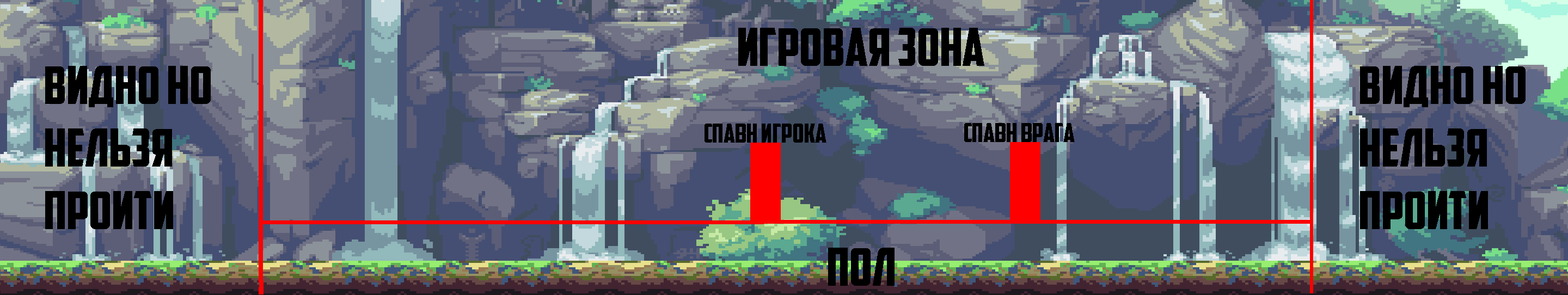
<style>
.page{position:relative;width:1568px;height:295px}
.page>*{position:absolute;margin:0}
.t1{font:52.3px "AmericanCaptainCyrillic";color:#000000}
.t2{font:26.1px "AmericanCaptainCyrillic";color:#000000}
</style>
<div class="page">
<p class="t1" style="left:738px;top:28px;width:246px;height:38px">ИГРОВАЯ ЗОНА</p>
<p class="t1" style="left:45px;top:66px;width:166px;height:163px">ВИДНО НО<br>НЕЛЬЗЯ <br>ПРОЙТИ</p>
<p class="t1" style="left:1360px;top:66px;width:166px;height:163px">ВИДНО НО<br>НЕЛЬЗЯ <br>ПРОЙТИ</p>
<p class="t2" style="left:705px;top:124px;width:121px;height:19px">СПАВН ИГРОКА</p>
<p class="t2" style="left:964px;top:123px;width:111px;height:19px">СПАВН ВРАГА</p>
<p class="t1" style="left:828px;top:248px;width:67px;height:38px">ПОЛ</p>
</div>
